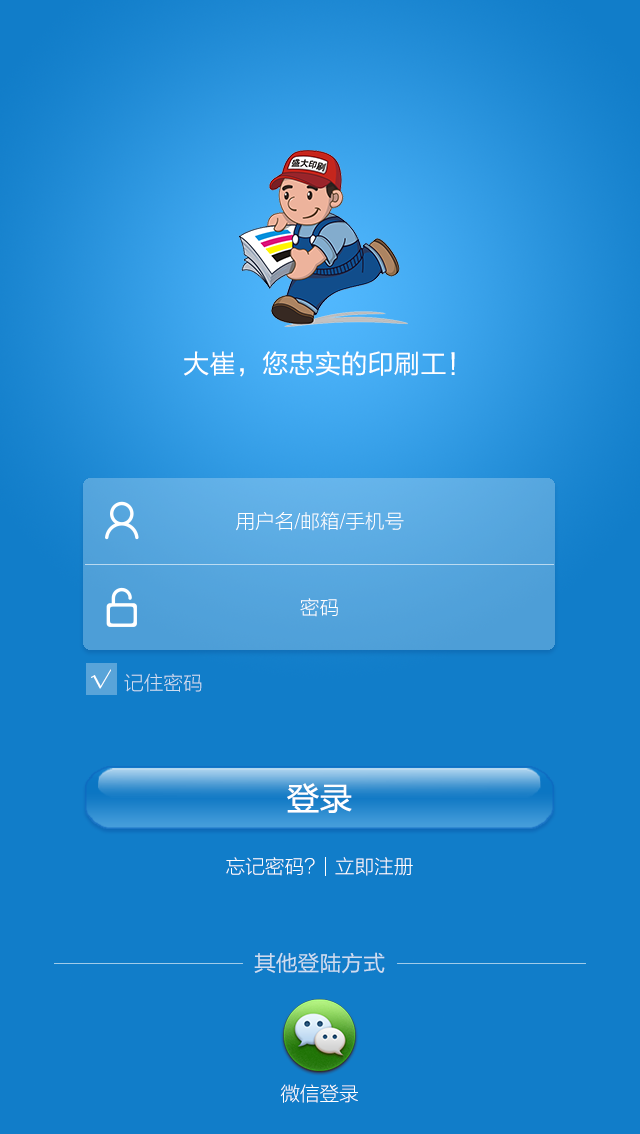
<style>
.page{position:relative;width:640px;height:1134px;background:#117dc9}
.page>*{position:absolute;margin:0}
.t1{font:26.3px "FZLTHJW--GB1-0";color:#ffffff}
.t2{font:19.7px "FZLTKHK--GBK1-0";color:#ffffff}
.t3{font:19.7px "FZLTZHK--GBK1-0";color:#ffffff}
.t4{font:19.7px "FZLTKHK--GBK1-0";color:#cdddf0}
.t5{font:32.8px "FZLTHJW--GB1-0";color:#ffffff}
.t6{font:21.8px "FZLTHJW--GB1-0";color:#cdddf0}
</style>
<div class="page">
<p class="t1" style="left:184px;top:351px;width:271px;height:26px">大崔，您忠实的印刷工！</p>
<p class="t2" style="left:236px;top:511px;width:168px;height:20px">用户名/邮箱/手机号</p>
<p class="t2" style="left:300px;top:598px;width:38px;height:19px">密码</p>
<p class="t3" style="left:91px;top:669px;width:20px;height:20px">√</p>
<p class="t4" style="left:124px;top:673px;width:78px;height:19px">记住密码</p>
<p class="t5" style="left:287px;top:783px;width:65px;height:30px">登录</p>
<p class="t2" style="left:226px;top:857px;width:187px;height:19px">忘记密码？  立即注册</p>
<p class="t6" style="left:254px;top:952px;width:131px;height:22px">其他登陆方式</p>
<p class="t2" style="left:280px;top:1084px;width:78px;height:19px">微信登录</p>
</div>
